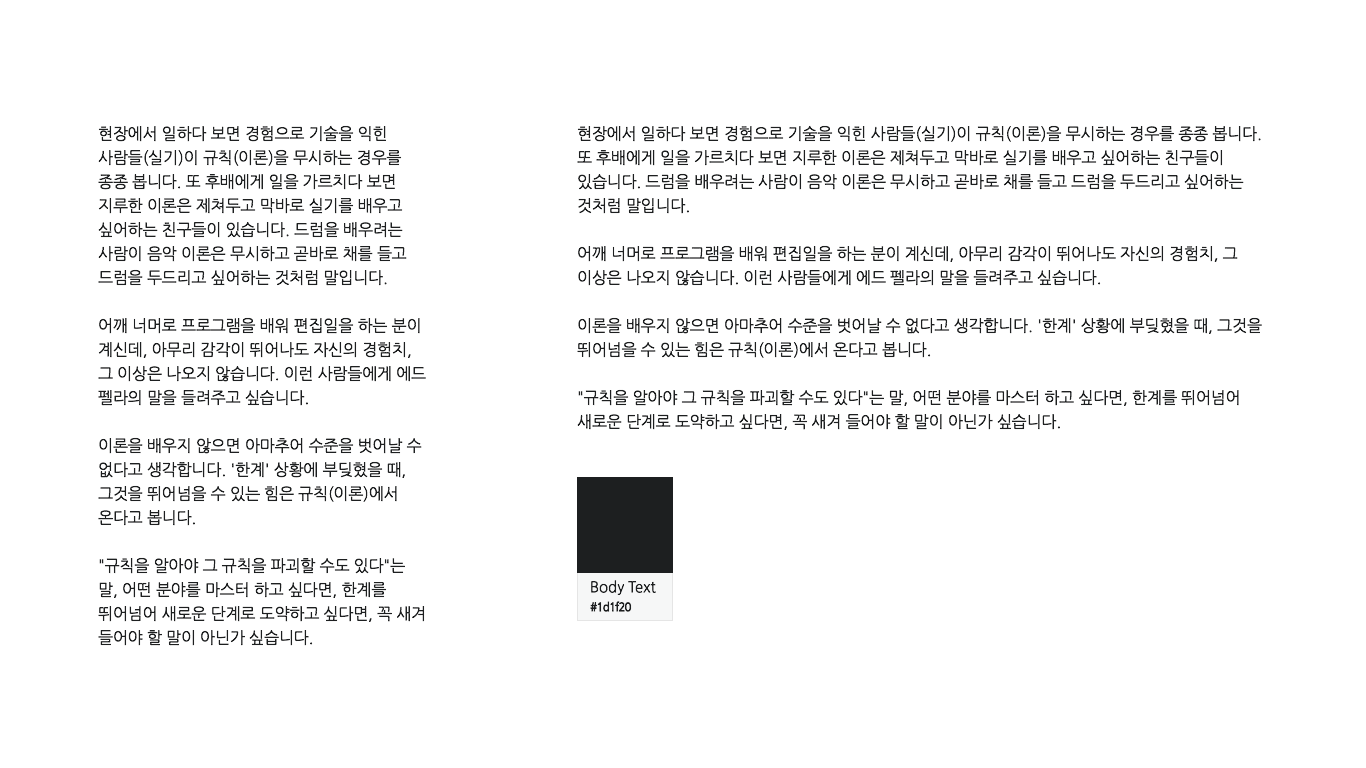
<style>
.page{position:relative;width:1366px;height:768px;background:#ffffff}
.page>*{position:absolute;margin:0}
.t1{font:16px "NanumGothic";letter-spacing:-0.01em;color:#1d1f20}
.t2{font:15px/19px "NanumGothic";letter-spacing:-0.01em;color:#1d1f20}
.t3{font:12px/19px "NanumGothicBold";letter-spacing:-0.09em;color:#1d1f20}
</style>
<div class="page">
<p class="t1" style="left:98px;top:125px;width:328px;height:521px">현장에서 일하다 보면 경험으로 기술을 익힌 사람들(실기)이 규칙(이론)을 무시하는 경우를 종종 봅니다. 또 후배에게 일을 가르치다 보면 지루한 이론은 제쳐두고 막바로 실기를 배우고 싶어하는 친구들이 있습니다. 드럼을 배우려는 사람이 음악 이론은 무시하고 곧바로 채를 들고 드럼을 두드리고 싶어하는 것처럼 말입니다.<br>어깨 너머로 프로그램을 배워 편집일을 하는 분이 계신데, 아무리 감각이 뛰어나도 자신의 경험치, 그 이상은 나오지 않습니다. 이런 사람들에게 에드 펠라의 말을 들려주고 싶습니다.      <br>이론을 배우지 않으면 아마추어 수준을 벗어날 수 없다고 생각합니다. '한계' 상황에 부딪혔을 때, 그것을 뛰어넘을 수 있는 힘은 규칙(이론)에서 온다고 봅니다.<br>"규칙을 알아야 그 규칙을 파괴할 수도 있다"는 말, 어떤 분야를 마스터 하고 싶다면, 한계를 뛰어넘어 새로운 단계로 도약하고 싶다면, 꼭 새겨 들어야 할 말이 아닌가 싶습니다.</p>
<p class="t1" style="left:577px;top:125px;width:685px;height:305px">현장에서 일하다 보면 경험으로 기술을 익힌 사람들(실기)이 규칙(이론)을 무시하는 경우를 종종 봅니다. 또 후배에게 일을 가르치다 보면 지루한 이론은 제쳐두고 막바로 실기를 배우고 싶어하는 친구들이 있습니다. 드럼을 배우려는 사람이 음악 이론은 무시하고 곧바로 채를 들고 드럼을 두드리고 싶어하는 것처럼 말입니다.<br>어깨 너머로 프로그램을 배워 편집일을 하는 분이 계신데, 아무리 감각이 뛰어나도 자신의 경험치, 그 이상은 나오지 않습니다. 이런 사람들에게 에드 펠라의 말을 들려주고 싶습니다.      <br>이론을 배우지 않으면 아마추어 수준을 벗어날 수 없다고 생각합니다. '한계' 상황에 부딪혔을 때, 그것을 뛰어넘을 수 있는 힘은 규칙(이론)에서 온다고 봅니다.<br>"규칙을 알아야 그 규칙을 파괴할 수도 있다"는 말, 어떤 분야를 마스터 하고 싶다면, 한계를 뛰어넘어 새로운 단계로 도약하고 싶다면, 꼭 새겨 들어야 할 말이 아닌가 싶습니다.</p>
<p class="t2" style="left:590px;top:580px;width:66px;height:32px">Body Text<br><span class="t3">#1d1f20</span></p>
</div>
